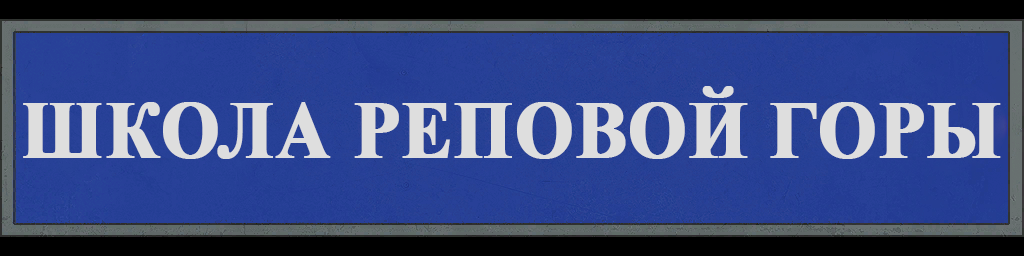
<style>
.page{position:relative;width:1024px;height:256px}
.page>*{position:absolute;margin:0}
.t1{font:82px "TimesNewRomanPS-BoldMT";color:#dedede;font-weight:bold;scale:0.92 1}
</style>
<div class="page">
<p class="t1" style="left:23px;top:86px;width:978px;height:73px">ШКОЛА РЕПОВОЙ ГОРЫ</p>
</div>
